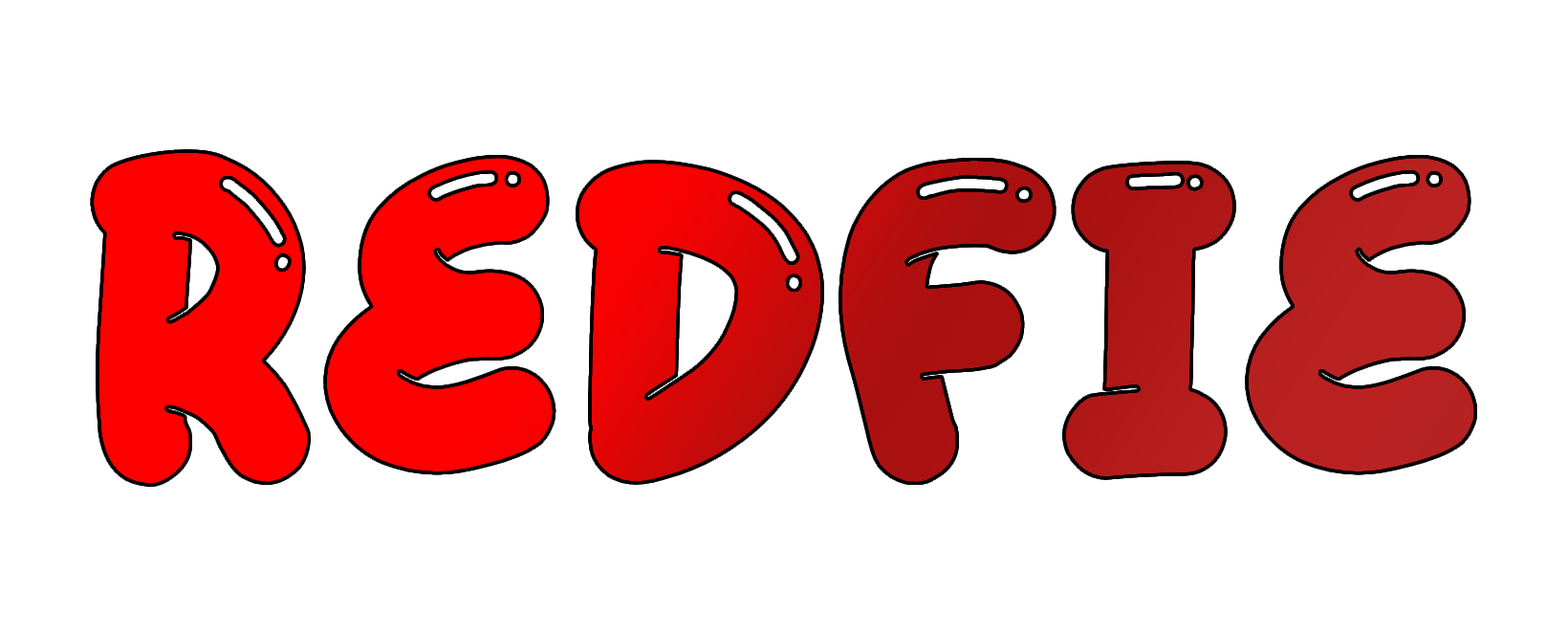
<style>
.page{position:relative;width:1568px;height:635px;background:#ffffff}
.page>*{position:absolute;margin:0}
.t1{font:430.2px "PlaydohRegular"}
</style>
<div class="page">
<p class="t1" style="left:90px;top:149px;width:1387px;height:337px">REDFIE</p>
</div>
